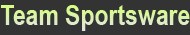
<style>
.page{position:relative;width:190px;height:35px;background:#333333}
.page>*{position:absolute;margin:0}
.t1{font:28px "ArialNarrow-Bold"}
</style>
<div class="page">
<p class="t1" style="left:1px;top:5px;width:189px;height:26px">Team Sportsware</p>
</div>
